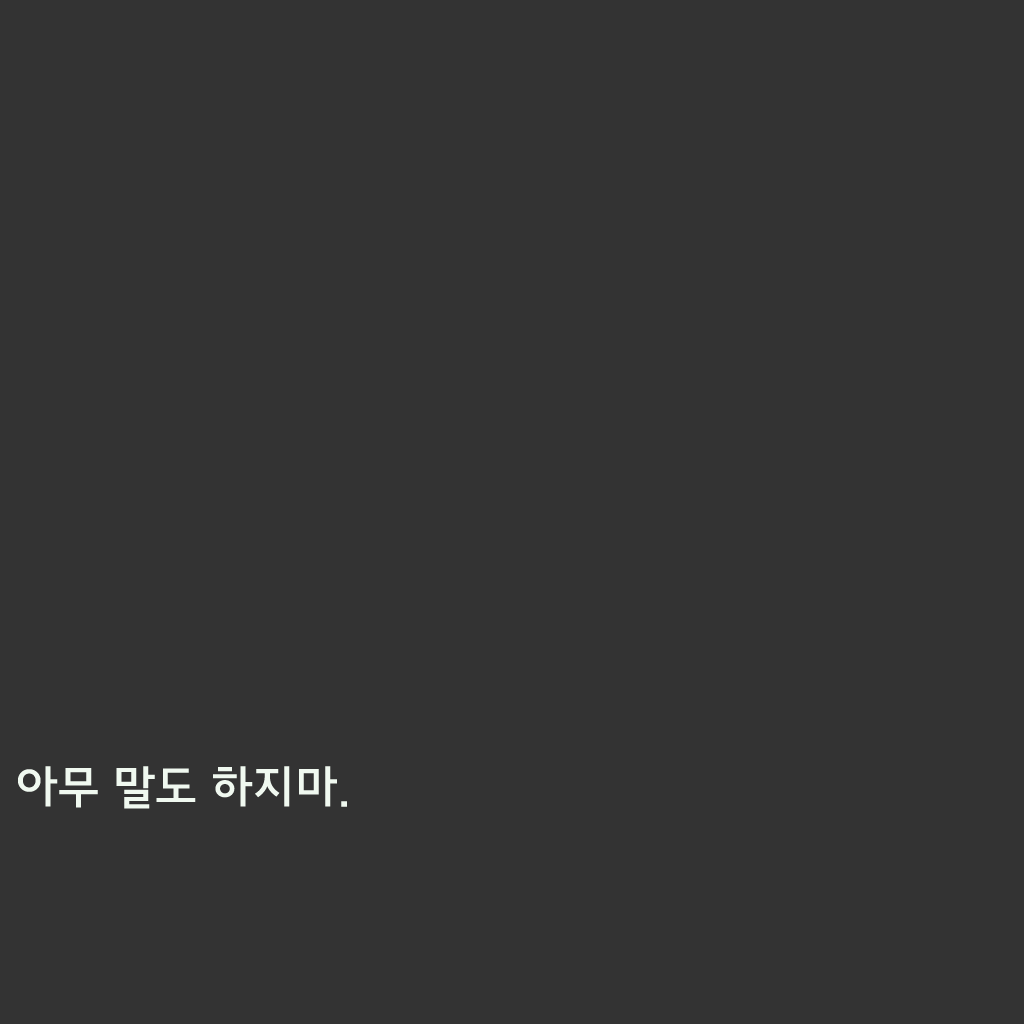
<style>
.page{position:relative;width:1024px;height:1024px;background:#333333}
.page>*{position:absolute;margin:0}
.t1{font:46px "JejuGothic";color:#f0f9f0}
</style>
<div class="page">
<p class="t1" style="left:18px;top:766px;width:329px;height:43px">아무 말도 하지마.</p>
</div>
